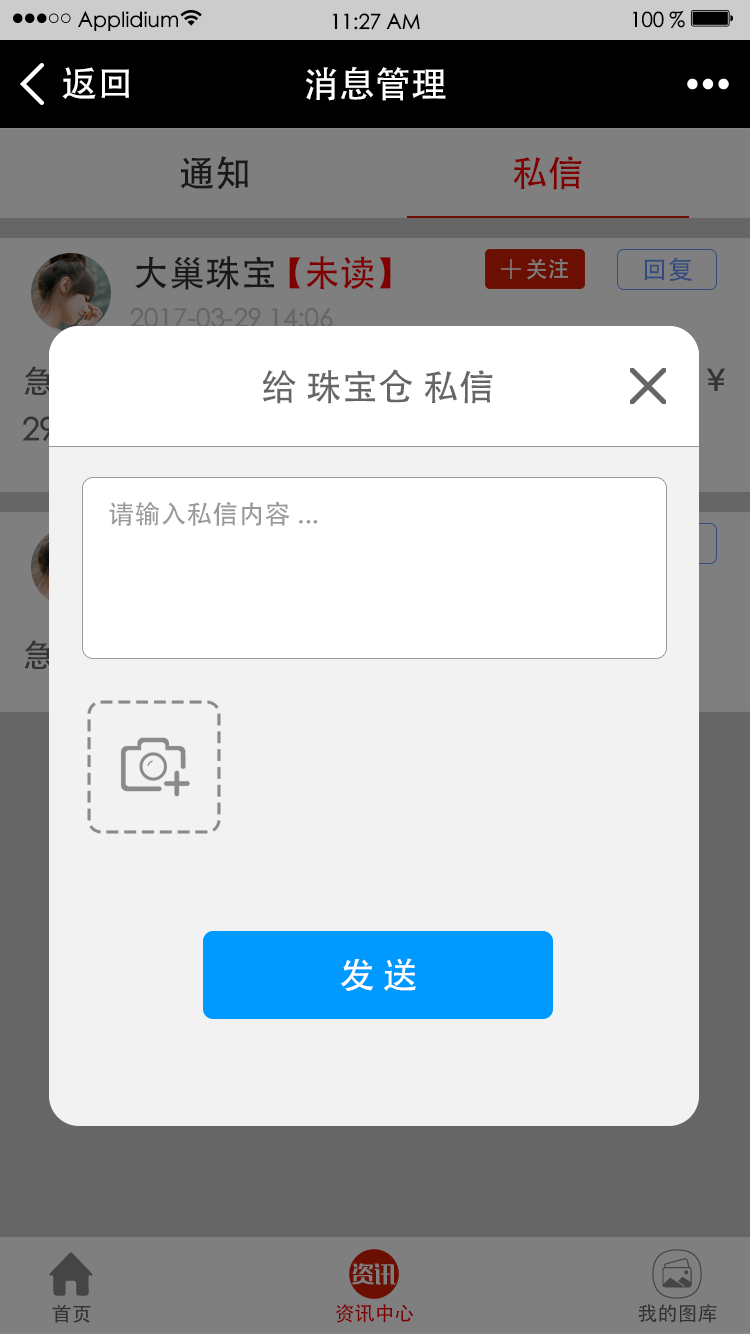
<style>
.page{position:relative;width:750px;height:1334px;background:#f2f2f2}
.page>*{position:absolute;margin:0}
.t1{font:20.9px "STHeiti";color:#000000}
.t2{font:36px "STHeiti";color:#ffffff}
.t3{font:36px "STHeiti";color:#191919}
.t4{font:36px "STHeiti";color:#7f0000}
.t5{font:36px "STHeiti"}
.t6{font:26px "STHeiti";color:#334c7f}
.t7{font:22px "STHeiti";color:#7f7f7f}
.t8{font:36px "STHeiti";color:#666666}
.t9{font:26px "STHeiti";color:#999999}
.t10{font:36px "STHeiti";letter-spacing:0.2em;color:#ffffff}
.t11{font:20px "STHeiti";color:#333333}
.t12{font:20px "STHeiti";color:#7f0000}
</style>
<div class="page">
<p class="t1" style="left:78px;top:11px;width:100px;height:20px">Applidium</p>
<p class="t1" style="left:332px;top:13px;width:88px;height:17px">11:27 AM</p>
<p class="t1" style="left:632px;top:11px;width:53px;height:17px">100 %</p>
<p class="t2" style="left:62px;top:67px;width:67px;height:32px">返回</p>
<p class="t2" style="left:306px;top:66px;width:140px;height:35px">消息管理</p>
<p class="t3" style="left:180px;top:156px;width:68px;height:34px">通知</p>
<p class="t4" style="left:513px;top:156px;width:69px;height:34px">私信</p>
<p class="t5" style="left:135px;top:256px;width:256px;height:34px">大巢珠宝 【未读】</p>
<p class="t6" style="left:644px;top:257px;width:48px;height:24px">回复</p>
<p class="t7" style="left:526px;top:258px;width:42px;height:22px">关注</p>
<p class="t8" style="left:262px;top:369px;width:231px;height:35px">给 珠宝仓 私信</p>
<p class="t9" style="left:109px;top:501px;width:209px;height:25px">请输入私信内容...</p>
<p class="t10" style="left:340px;top:958px;width:76px;height:33px">发送</p>
<p class="t11" style="left:52px;top:1304px;width:39px;height:19px">首页</p>
<p class="t12" style="left:335px;top:1304px;width:79px;height:19px">资讯中心</p>
<p class="t11" style="left:638px;top:1304px;width:79px;height:19px">我的图库</p>
</div>
